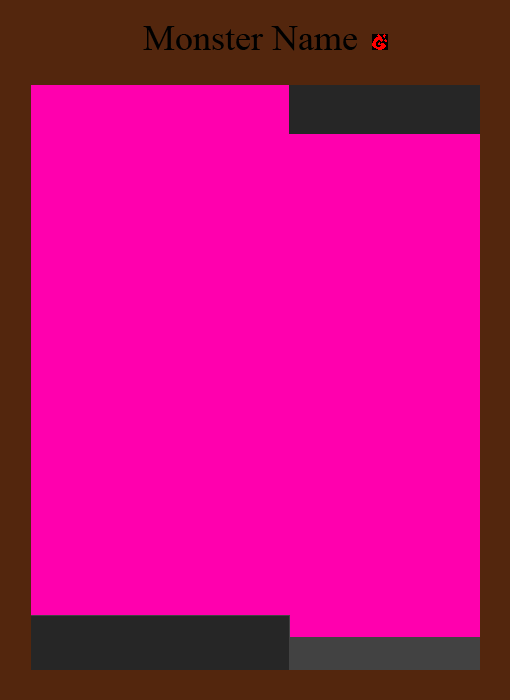
<style>
.page{position:relative;width:510px;height:700px;background:#ff00ae}
.page>*{position:absolute;margin:0}
.t1{font:36px "TimesNewRomanPSMT";color:#000000}
</style>
<div class="page">
<p class="t1" style="left:143px;top:26px;width:214px;height:25px">Monster Name</p>
</div>
